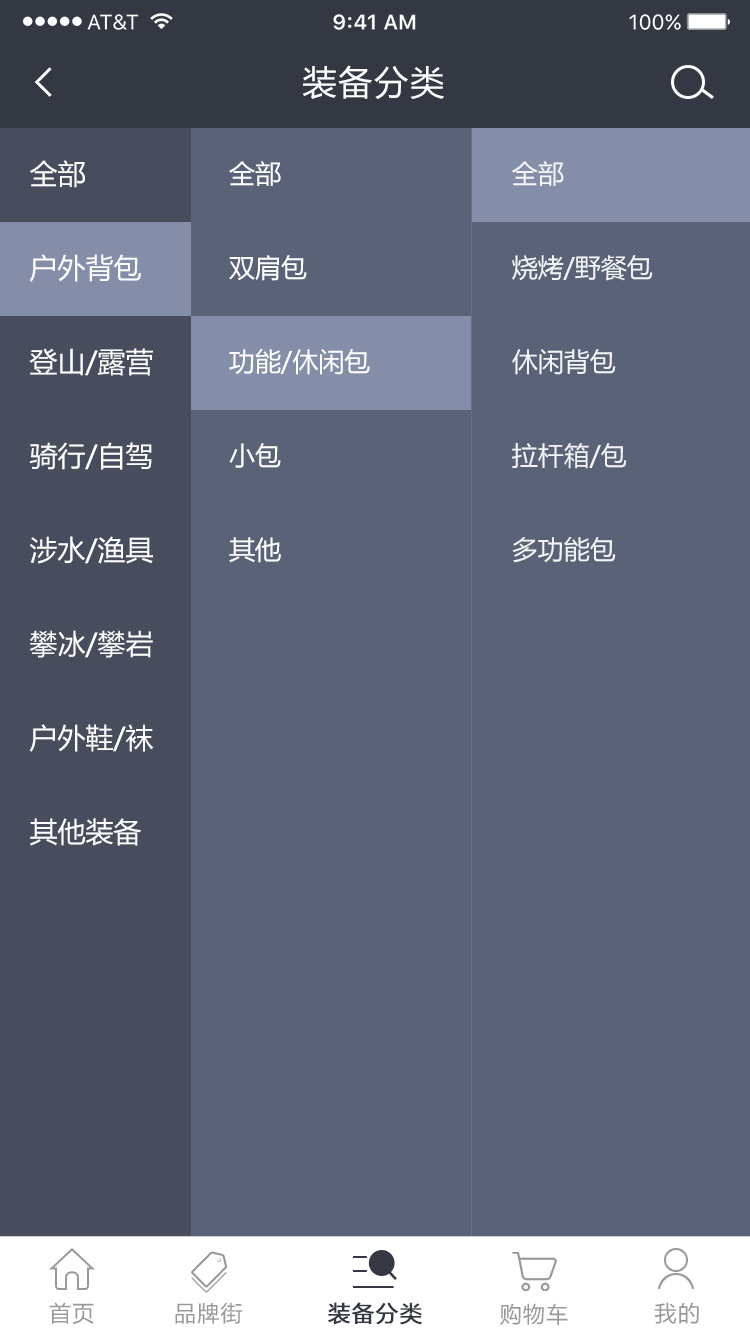
<style>
.page{position:relative;width:750px;height:1334px;background:#5a6277}
.page>*{position:absolute;margin:0}
.t1{font:34px "MicrosoftYaHei";letter-spacing:0.06em;color:#ffffff}
.t2{font:28px/47px "MicrosoftYaHei";color:#ffffff}
.t3{font:26px/47px "MicrosoftYaHei";color:#ffffff}
.t4{font:22px "MicrosoftYaHei";letter-spacing:0.06em;color:#999999}
.t5{font:22px "MicrosoftYaHei";letter-spacing:0.06em;color:#343843;font-weight:bold}
</style>
<div class="page">
<p class="t1" style="left:302px;top:65px;width:142px;height:34px">装备分类</p>
<p class="t2" style="left:29px;top:160px;width:125px;height:686px">全部<br><br>户外背包<br><br>登山/露营<br><br>骑行/自驾<br><br>涉水/渔具<br><br>攀冰/攀岩<br><br>户外鞋/袜<br><br>其他装备</p>
<p class="t3" style="left:229px;top:161px;width:141px;height:402px">全部<br><br>双肩包<br><br>功能/休闲包<br><br>小包<br><br>其他</p>
<p class="t3" style="left:512px;top:161px;width:141px;height:402px;opacity:0.91">全部<br><br>烧烤/野餐包<br><br>休闲背包<br><br>拉杆箱/包<br><br>多功能包</p>
<p class="t4" style="left:49px;top:1302px;width:45px;height:22px">首页</p>
<p class="t4" style="left:175px;top:1302px;width:68px;height:22px">品牌街</p>
<p class="t5" style="left:328px;top:1302px;width:94px;height:23px">装备分类</p>
<p class="t4" style="left:654px;top:1302px;width:45px;height:22px">我的</p>
<p class="t4" style="left:500px;top:1303px;width:68px;height:22px">购物车</p>
</div>
